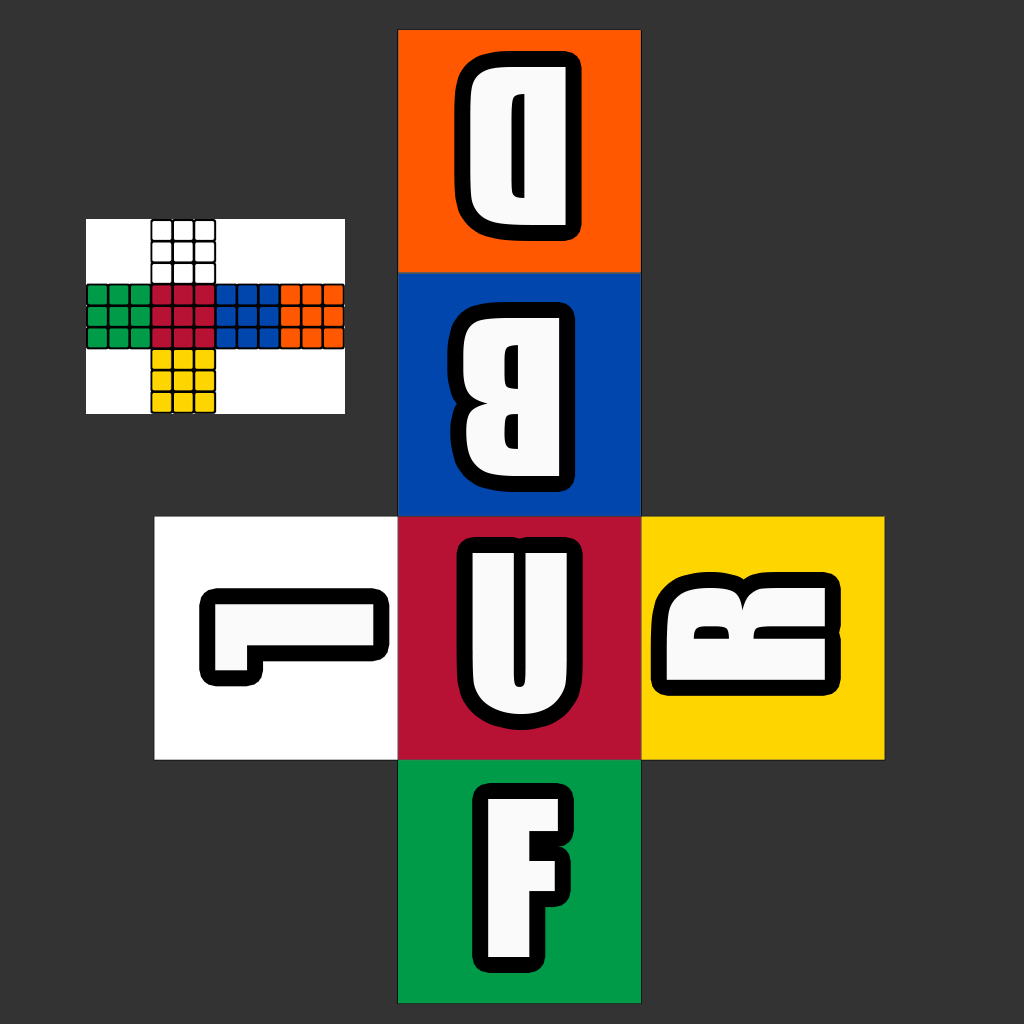
<style>
.page{position:relative;width:1024px;height:1024px;background:#333333}
.page>*{position:absolute;margin:0}
.t1{font:200px "Impact";color:#fafafa}
</style>
<div class="page">
<p class="t1" style="left:470px;top:67px;width:96px;height:158px;rotate:180deg">D</p>
<p class="t1" style="left:463px;top:318px;width:97px;height:158px;rotate:180deg">B</p>
<p class="t1" style="left:472px;top:553px;width:95px;height:161px">U</p>
<p class="t1" style="left:666px;top:588px;width:159px;height:92px;rotate:-90deg">R</p>
<p class="t1" style="left:215px;top:604px;width:159px;height:67px;rotate:90deg">L</p>
<p class="t1" style="left:488px;top:799px;width:70px;height:158px">F</p>
</div>
